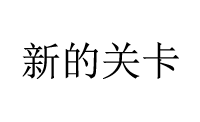
<style>
.page{position:relative;width:200px;height:122px;background:#ffffff}
.page>*{position:absolute;margin:0}
.t1{font:40px "SimSun";color:#000000}
</style>
<div class="page">
<p class="t1" style="left:22px;top:42px;width:157px;height:37px">新的关卡</p>
</div>
